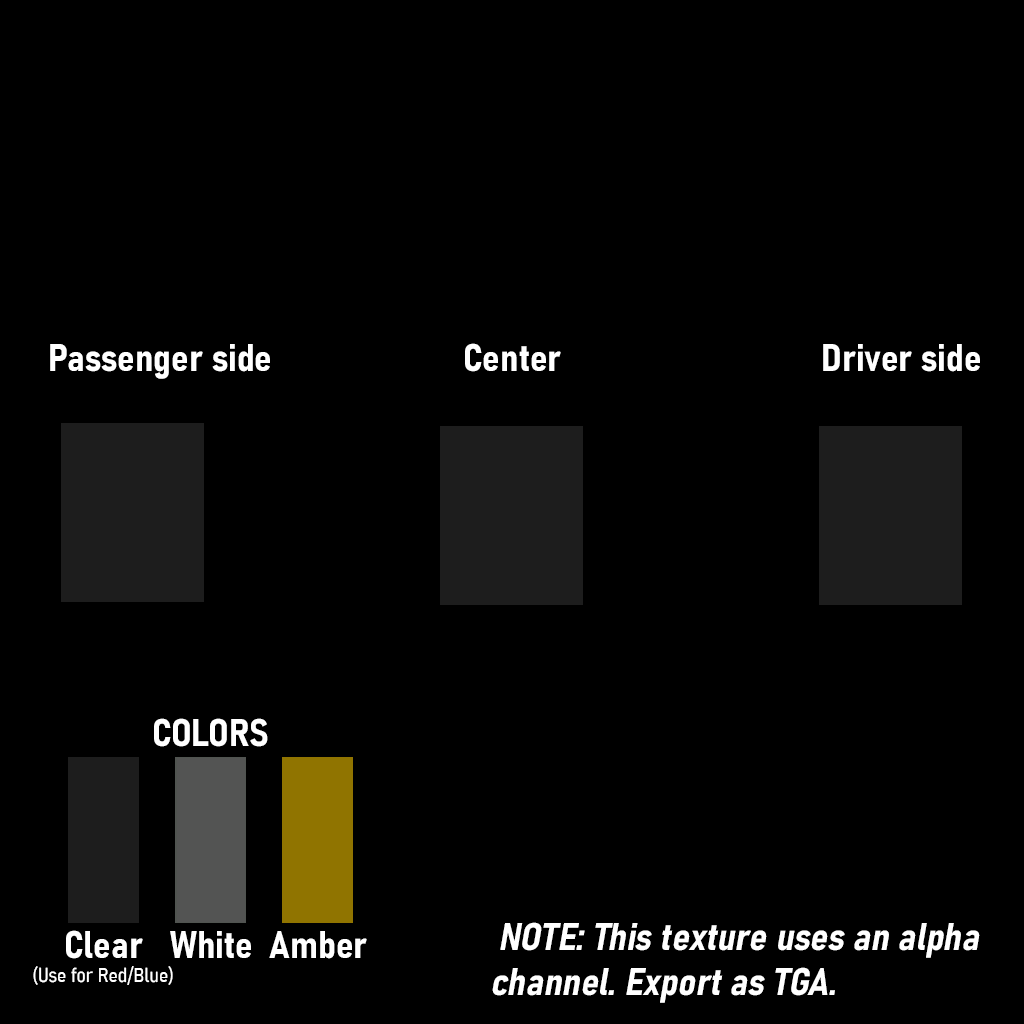
<style>
.page{position:relative;width:1024px;height:1024px;background:#000000}
.page>*{position:absolute;margin:0}
.t1{font:38px "Bahnschrift-BoldSemiCondensed";color:#ffffff}
.t2{font:38.6px "Bahnschrift-BoldSemiCondensed";color:#ffffff}
.t3{font:20px "Bahnschrift-SemiLightSemiCondensed";color:#ffffff}
</style>
<div class="page">
<p class="t1" style="left:50px;top:344px;width:220px;height:35px">Passenger side</p>
<p class="t1" style="left:465px;top:343px;width:96px;height:29px">Center</p>
<p class="t1" style="left:823px;top:344px;width:157px;height:28px">Driver side</p>
<p class="t1" style="left:154px;top:718px;width:114px;height:29px">COLORS</p>
<p class="t2" style="left:492px;top:922px;width:488px;height:81px">NOTE: This texture uses an alpha <br>channel. Export as TGA.</p>
<p class="t3" style="left:33px;top:930px;width:140px;height:55px;text-align:center"><span class="t1">Clear<br></span>(Use for Red/Blue)</p>
<p class="t1" style="left:170px;top:931px;width:81px;height:27px">White</p>
<p class="t1" style="left:269px;top:931px;width:98px;height:28px">Amber</p>
</div>
